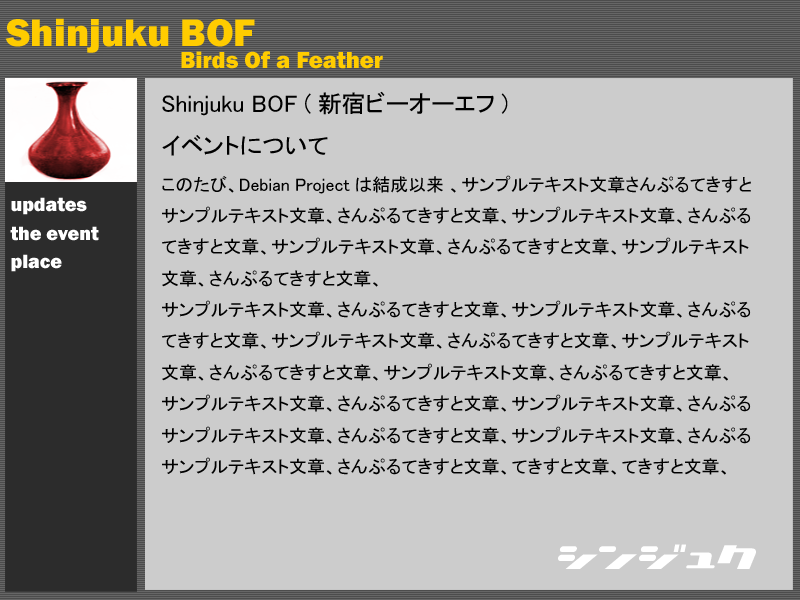
<style>
.page{position:relative;width:800px;height:600px;background:#cccccc}
.page>*{position:absolute;margin:0}
.t1{font:39.9px "FranklinGothic-Heavy";color:#ffcc00}
.t2{font:23.9px "FranklinGothic-Heavy";color:#ffcc00}
.t3{font:17.9px "MS-PGothic";color:#000000}
.t4{font:23.9px "MS-PGothic";color:#000000}
.t5{font:19.9px "FranklinGothic-Heavy";color:#ffffff}
.t6{font:35.9px "NationalyzeKAT";color:#ffffff}
</style>
<div class="page">
<p class="t1" style="left:5px;top:18px;width:250px;height:35px">Shinjuku BOF</p>
<p class="t2" style="left:181px;top:51px;width:202px;height:18px">Birds Of a Feather</p>
<p class="t3" style="left:162px;top:91px;width:589px;height:384px"><span class="t4">Shinjuku BOF (新宿ビーオーエフ)<br>イベントについて<br></span>このたび、Debian Projectは結成以来 、サンプルテキスト文章さんぷるてきすと<br>サンプルテキスト文章、さんぷるてきすと文章、サンプルテキスト文章、さんぷる<br>てきすと文章、サンプルテキスト文章、さんぷるてきすと文章、サンプルテキスト<br>文章、さんぷるてきすと文章、<br>サンプルテキスト文章、さんぷるてきすと文章、サンプルテキスト文章、さんぷる<br>てきすと文章、サンプルテキスト文章、さんぷるてきすと文章、サンプルテキスト<br>文章、さんぷるてきすと文章、サンプルテキスト文章、さんぷるてきすと文章、<br>サンプルテキスト文章、さんぷるてきすと文章、サンプルテキスト文章、さんぷる<br>サンプルテキスト文章、さんぷるてきすと文章、サンプルテキスト文章、さんぷる<br>サンプルテキスト文章、さんぷるてきすと文章、てきすと文章、てきすと文章、</p>
<p class="t5" style="left:11px;top:197px;width:76px;height:18px">updates</p>
<p class="t5" style="left:10px;top:226px;width:89px;height:15px">the event</p>
<p class="t5" style="left:11px;top:254px;width:51px;height:18px">place</p>
<p class="t6" style="left:558px;top:544px;width:198px;height:25px">dyD(h</p>
</div>
